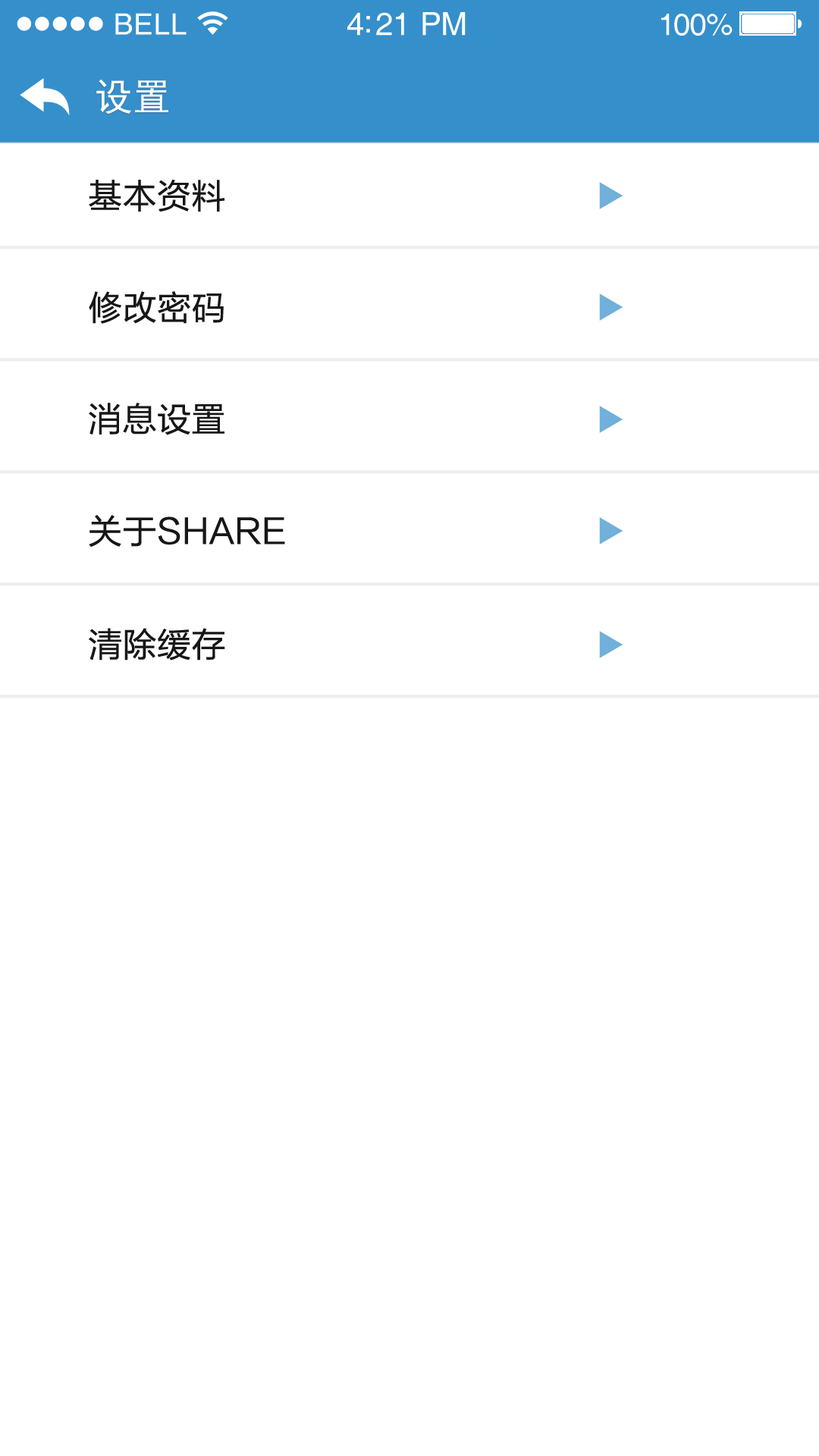
<style>
.page{position:relative;width:819px;height:1456px;background:#ffffff}
.page>*{position:absolute;margin:0}
.t1{font:29.3px "Helvetica";letter-spacing:0.02em;color:#ffffff}
.t2{font:31.8px "Helvetica";letter-spacing:-0.02em;color:#ffffff}
.t3{font:30.6px "Helvetica";letter-spacing:-0.02em;color:#ffffff}
.t4{font:37.9px "SimHei";color:#ffffff}
.t5{font:34.1px "FZLTHJW--GB1-0";letter-spacing:0.01em;color:#171717}
</style>
<div class="page">
<p class="t1" style="left:115px;top:13px;width:72px;height:22px">BELL</p>
<p class="t2" style="left:347px;top:12px;width:119px;height:24px">4:21 PM</p>
<p class="t3" style="left:661px;top:14px;width:72px;height:22px">100%</p>
<p class="t4" style="left:96px;top:79px;width:72px;height:36px">设置</p>
<p class="t5" style="left:89px;top:179px;width:136px;height:33px">基本资料</p>
<p class="t5" style="left:89px;top:291px;width:135px;height:33px">修改密码</p>
<p class="t5" style="left:89px;top:403px;width:135px;height:32px">消息设置</p>
<p class="t5" style="left:89px;top:515px;width:196px;height:33px">关于SHARE</p>
<p class="t5" style="left:89px;top:628px;width:136px;height:32px">清除缓存</p>
</div>
